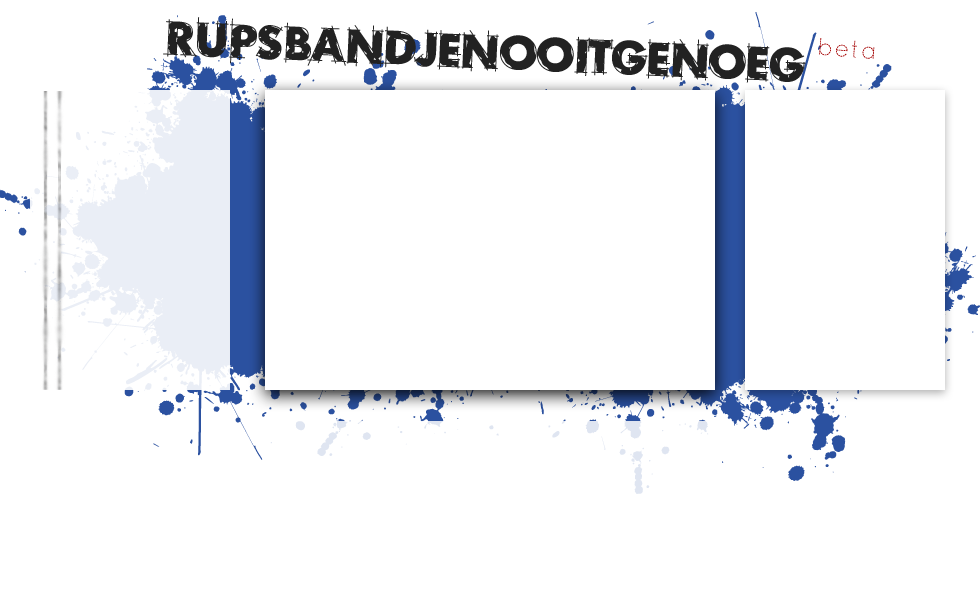
<style>
.page{position:relative;width:980px;height:600px;background:#ffffff}
.page>*{position:absolute;margin:0}
.t1{font:46.2px "RoughDraft";color:#222222}
.t2{font:24px "QuicksandDash-Regular";letter-spacing:0.06em;color:#a50303}
</style>
<div class="page">
<p class="t1" style="left:163px;top:17px;width:643px;height:66px;rotate:2deg">RUPSBANDJENOOITGENOEG</p>
<p class="t2" style="left:819px;top:38px;width:56px;height:21px;rotate:4deg">beta</p>
</div>
